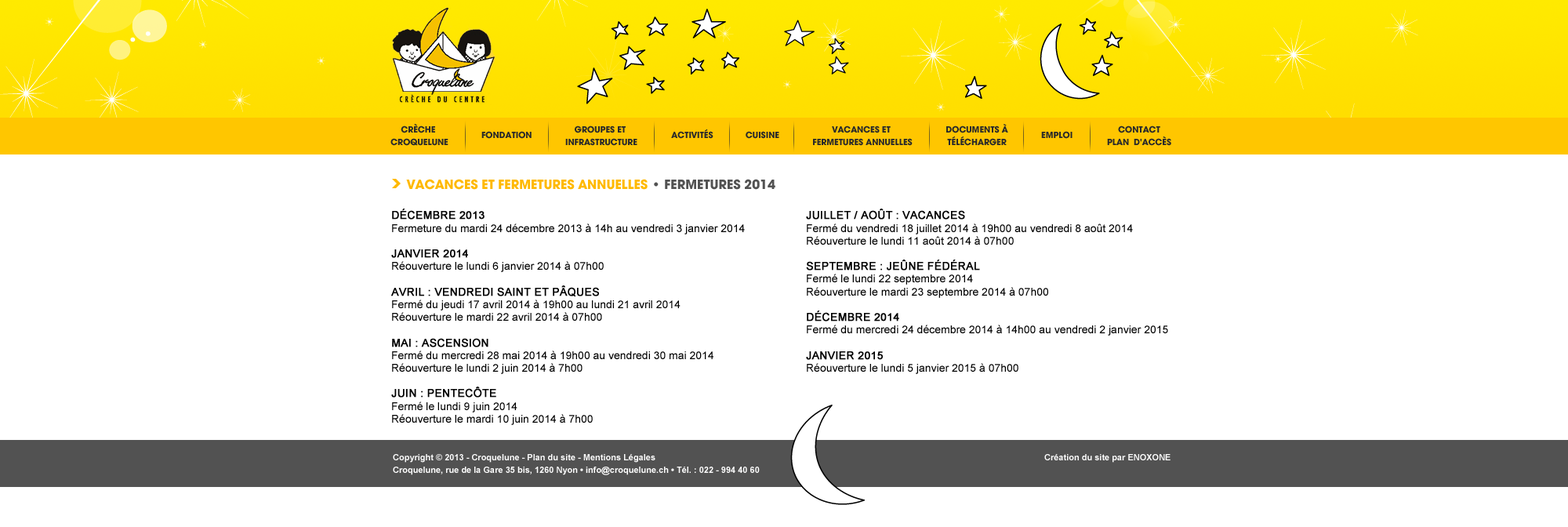
<style>
.page{position:relative;width:1568px;height:527px;background:#ffffff}
.page>*{position:absolute;margin:0}
.t1{font:9.4px/12.7px "AvantGard-Bold";color:#2a2a2a;text-transform:uppercase}
.t2{font:9.4px "AvantGard-Bold";color:#2a2a2a;text-transform:uppercase}
.t3{font:14.1px "AvantGard-Bold";color:#ffb900;text-transform:uppercase}
.t4{font:14.1px "AvantGard-Bold";color:#525252;text-transform:uppercase}
.t5{font:11px/12.7px "ArialMT";color:#000000}
.t6{font:11px/12.7px "ArialMT";color:#000000;text-transform:uppercase;font-weight:bold}
.t7{font:8.6px/12.7px "Arial-BoldMT";color:#ffffff}
</style>
<div class="page">
<p class="t1" style="left:390px;top:123px;width:58px;height:23px;text-align:center">Crèche <br>Croquelune</p>
<p class="t1" style="left:565px;top:125px;width:72px;height:21px;text-align:center">Groupes et <br>infrastructure</p>
<p class="t1" style="left:813px;top:125px;width:100px;height:21px;text-align:center">Vacances et <br>fermetures annuelles</p>
<p class="t1" style="left:946px;top:124px;width:62px;height:22px;text-align:center">DOCUMENTs à<br>télécharger</p>
<p class="t1" style="left:1107px;top:125px;width:64px;height:21px;text-align:center">Contact<br>Plan  d'accès</p>
<p class="t2" style="left:481px;top:131px;width:51px;height:8px">Fondation</p>
<p class="t2" style="left:671px;top:129px;width:42px;height:10px">ACTIVITés</p>
<p class="t2" style="left:746px;top:131px;width:33px;height:8px">Cuisine</p>
<p class="t2" style="left:1041px;top:131px;width:32px;height:8px">Emploi</p>
<p class="t3" style="left:406px;top:179px;width:369px;height:11px">vacances et fermetures annuelles <span class="t4">• FERMETURES 2014</span></p>
<p class="t5" style="left:391px;top:209px;width:354px;height:216px;text-align:justify"><span class="t6">Décembre 2013<br></span>Fermeture du mardi 24 décembre 2013 à 14h au vendredi 3 janvier 2014<br><br><span class="t6">Janvier 2014<br></span>Réouverture le lundi 6 janvier 2014 à 07h00<br><br><span class="t6">Avril : Vendredi Saint et Pâques<br></span>Fermé du jeudi 17 avril 2014 à 19h00 au lundi 21 avril 2014<br>Réouverture le mardi 22 avril 2014 à 07h00<br><br><span class="t6">Mai : Ascension<br></span>Fermé du mercredi 28 mai 2014 à 19h00 au vendredi 30 mai 2014<br>Réouverture le lundi 2 juin 2014 à 7h00<br><br><span class="t6">Juin : Pentecôte<br></span>Fermé le lundi 9 juin 2014<br>Réouverture le mardi 10 juin 2014 à 7h00</p>
<p class="t5" style="left:806px;top:209px;width:362px;height:165px;text-align:justify"><span class="t6">Juillet / Août : vacances<br></span>Fermé du vendredi 18 juillet 2014 à 19h00 au vendredi 8 août 2014<br>Réouverture le lundi 11 août 2014 à 07h00<br><br><span class="t6">Septembre : Jeûne Fédéral<br></span>Fermé le lundi 22 septembre 2014<br>Réouverture le mardi 23 septembre 2014 à 07h00<br><br><span class="t6">Décembre 2014<br></span>Fermé du mercredi 24 décembre 2014 à 14h00 au vendredi 2 janvier 2015<br><br><span class="t6">Janvier 2015<br></span>Réouverture le lundi 5 janvier 2015 à 07h00</p>
<p class="t7" style="left:393px;top:454px;width:778px;height:21px">Copyright © 2013 - Croquelune - Plan du site - Mentions Légales                                                             Création du site par ENOXONE<br>Croquelune, rue de la Gare 35 bis, 1260 Nyon • info@croquelune.ch • Tél. : 022 - 994 40 60</p>
</div>
